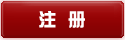
<style>
.page{position:relative;width:125px;height:40px}
.page>*{position:absolute;margin:0}
.t1{font:18px "DFZongYi-Bd-80-Win-GB";letter-spacing:0.06em;color:#ffffff}
</style>
<div class="page">
<p class="t1" style="left:39px;top:11px;width:46px;height:17px">注 册</p>
</div>
